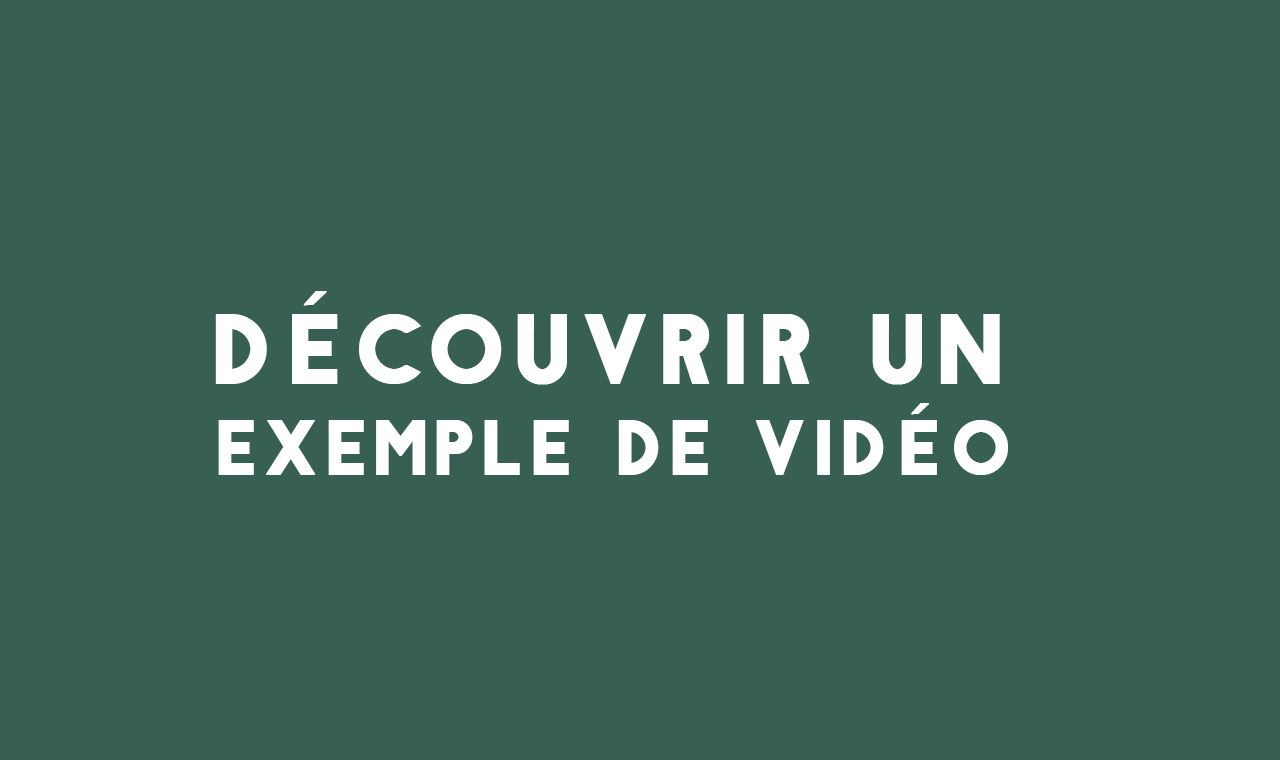
<style>
.page{position:relative;width:1280px;height:760px;background:#375f53}
.page>*{position:absolute;margin:0}
.t1{font:89.2px "Antraste";color:#ffffff;text-transform:uppercase;font-weight:bold}
.t2{font:69px "Antraste";color:#ffffff;text-transform:uppercase;font-weight:bold}
</style>
<div class="page">
<p class="t1" style="left:215px;top:291px;width:785px;height:94px">Découvrir un</p>
<p class="t2" style="left:218px;top:403px;width:790px;height:72px">exemple de vidéo</p>
</div>
